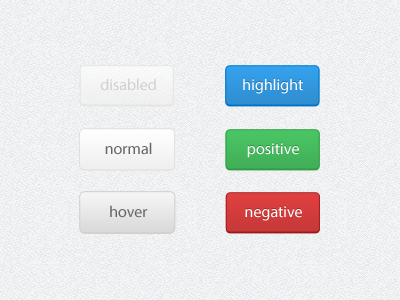
<style>
.page{position:relative;width:400px;height:300px}
.page>*{position:absolute;margin:0}
.t1{font:16px "MyriadPro-Regular";color:#d0d1d1}
.t2{font:16px "MyriadPro-Regular";color:#ffffff}
.t3{font:16px "MyriadPro-Regular";color:#666666}
</style>
<div class="page">
<p class="t1" style="left:100px;top:78px;width:56px;height:13px">disabled</p>
<p class="t2" style="left:243px;top:78px;width:60px;height:16px">highlight</p>
<p class="t3" style="left:105px;top:142px;width:47px;height:13px">normal</p>
<p class="t2" style="left:247px;top:143px;width:52px;height:15px">positive</p>
<p class="t3" style="left:110px;top:205px;width:38px;height:13px">hover</p>
<p class="t2" style="left:245px;top:206px;width:57px;height:15px">negative</p>
</div>
